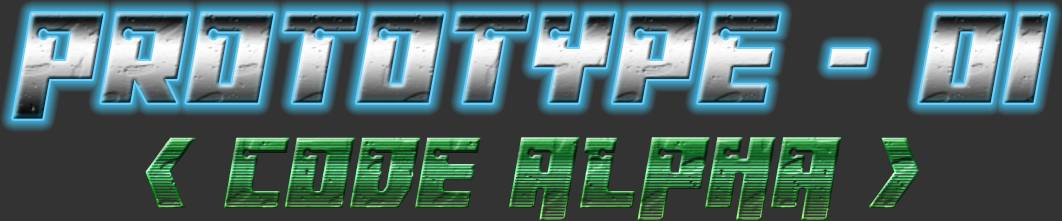
<style>
.page{position:relative;width:1062px;height:221px;background:#333333}
.page>*{position:absolute;margin:0}
.t1{font:121.8px "Dangerbot";letter-spacing:-0.02em;font-weight:bold}
.t2{font:97.8px "DangerbotChrome";letter-spacing:-0.02em;font-weight:bold}
</style>
<div class="page">
<p class="t1" style="left:13px;top:13px;width:1036px;height:106px">Prototype - 01</p>
<p class="t2" style="left:145px;top:137px;width:775px;height:84px">&lt; code ALPHA &gt;</p>
</div>
